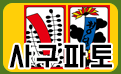
<style>
.page{position:relative;width:121px;height:74px}
.page>*{position:absolute;margin:0}
.t1{font:24px "BMDoHyeon";letter-spacing:-0.075em;color:#000000}
</style>
<div class="page">
<p class="t1" style="left:9px;top:44px;width:103px;height:24px">사 구 파 토</p>
</div>
